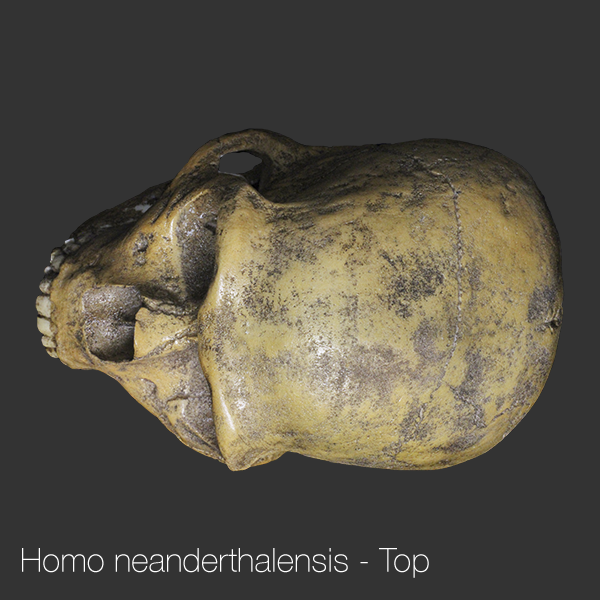
<style>
.page{position:relative;width:600px;height:600px;background:#333333}
.page>*{position:absolute;margin:0}
.t1{font:33.3px "HelveticaNeue-Thin";color:#ffffff}
</style>
<div class="page">
<p class="t1" style="left:22px;top:548px;width:407px;height:30px">Homo neanderthalensis - Top</p>
</div>
